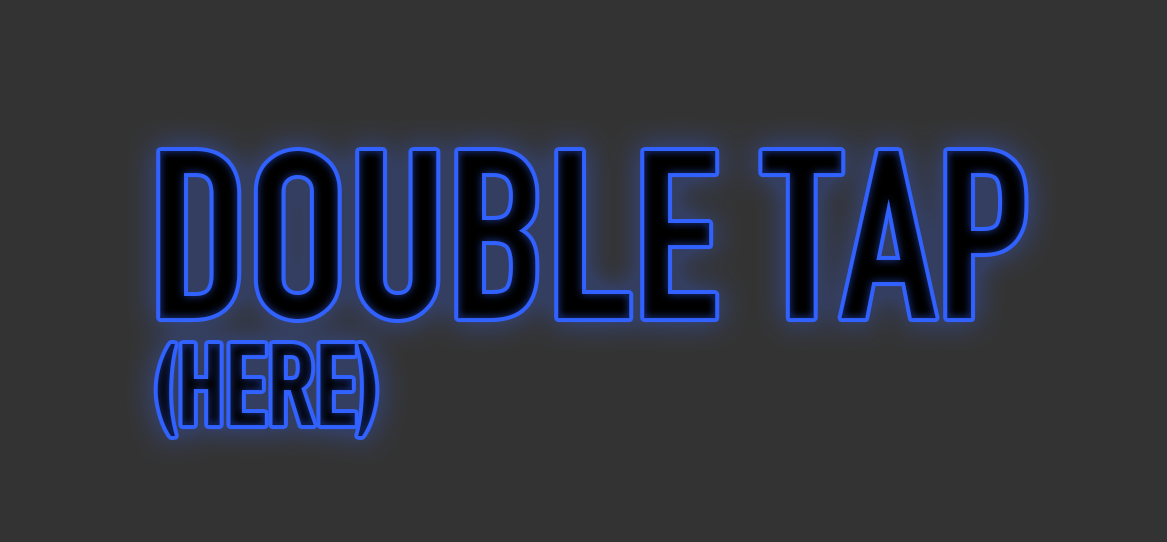
<style>
.page{position:relative;width:1167px;height:542px;background:#333333}
.page>*{position:absolute;margin:0}
.t1{font:233.7px "DINEngschrift";color:#02040b}
.t2{font:113.2px "DINEngschrift";color:#080f28}
</style>
<div class="page">
<p class="t1" style="left:160px;top:151px;width:865px;height:168px">DOUBLE TAP</p>
<p class="t2" style="left:157px;top:344px;width:219px;height:92px">(HERE)</p>
</div>
